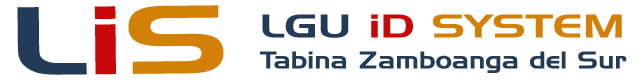
<style>
.page{position:relative;width:640px;height:80px;background:#ffffff}
.page>*{position:absolute;margin:0}
.t1{font:94.1px "HandelGothicBT-Regular";color:#233b56;scale:1.47 1}
.t2{font:94.1px "HandelGothicBT-Regular";color:#c80707;scale:1.47 1}
.t3{font:94.1px "HandelGothicBT-Regular";color:#d38008;scale:1.47 1}
.t4{font:32px "HandelGothicBT-Regular";color:#d38008;scale:1.38 1}
.t5{font:32px "HandelGothicBT-Regular";color:#233b56;scale:1.38 1}
.t6{font:32px "HandelGothicBT-Regular";color:#c80707;scale:1.38 1}
.t7{font:23.7px "HandelGothicBT-Regular";color:#233b56;scale:1.14 1}
</style>
<div class="page">
<p class="t1" style="left:17px;top:5px;width:207px;height:70px;rotate:-1deg">L<span class="t2">i</span><span class="t3">S</span></p>
<p class="t4" style="left:262px;top:14px;width:360px;height:24px"><span class="t5">LGU </span><span class="t6">iD </span>SYSTEM</p>
<p class="t7" style="left:260px;top:51px;width:367px;height:22px">Tabina Zamboanga del Sur</p>
</div>
